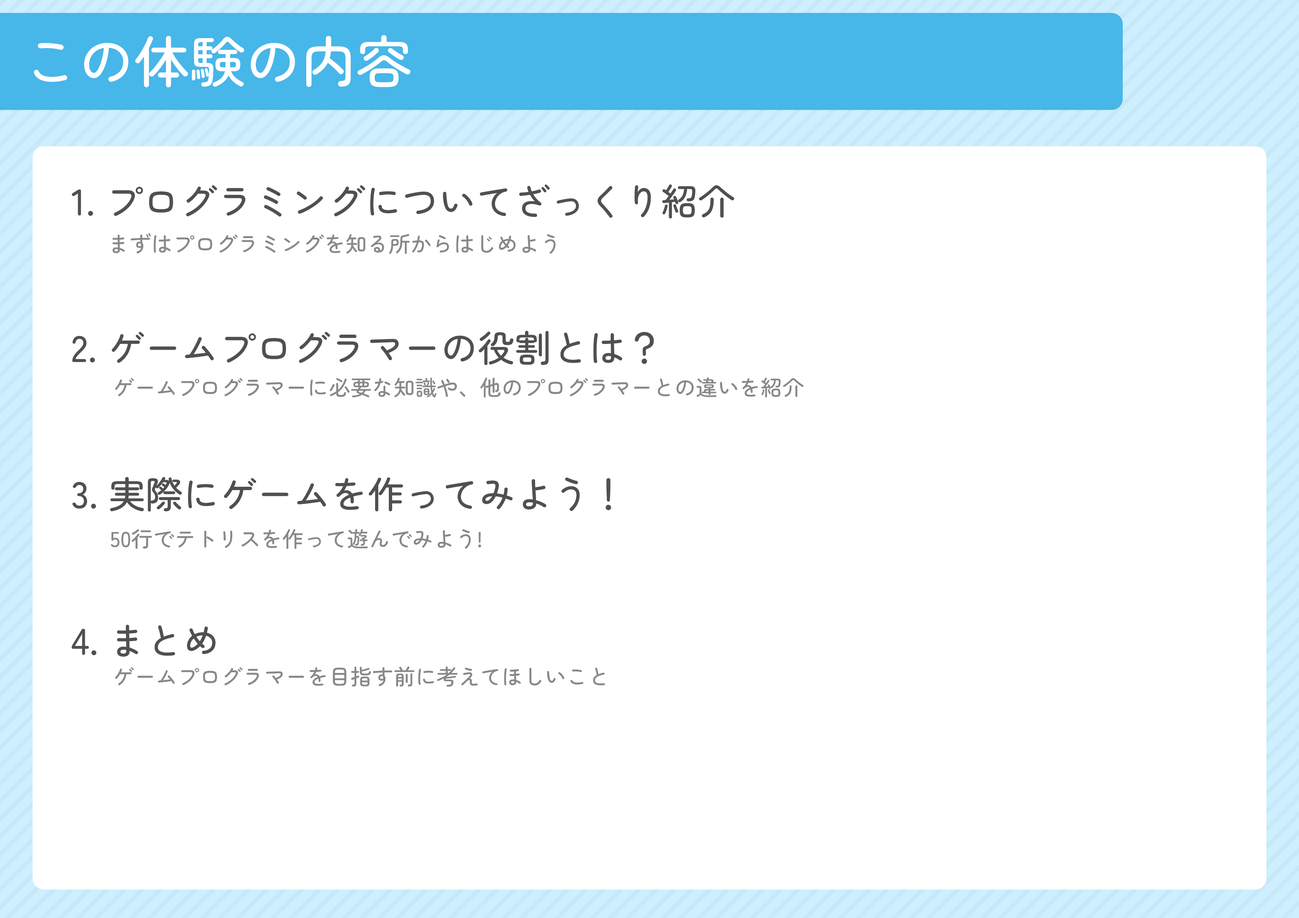
<style>
.page{position:relative;width:1299px;height:918px;background:#ffffff}
.page>*{position:absolute;margin:0}
.t1{font:55.5px "ZenMaruGothic-Medium";color:#ffffff}
.t2{font:37px/146.5px "ZenMaruGothic-Medium";color:#505050}
.t3{font:21.6px "ZenMaruGothic-Medium";color:#888888}
</style>
<div class="page">
<p class="t1" style="left:34px;top:35px;width:377px;height:53px">この体験の内容</p>
<p class="t2" style="left:71px;top:184px;width:663px;height:473px">1. プログラミングについてざっくり紹介<br>2. ゲームプログラマーの役割とは？<br>3. 実際にゲームを作ってみよう！<br>4. まとめ</p>
<p class="t3" style="left:112px;top:233px;width:444px;height:21px">まずはプログラミングを知る所からはじめよう</p>
<p class="t3" style="left:115px;top:377px;width:688px;height:21px">ゲームプログラマーに必要な知識や、他のプログラマーとの違いを紹介</p>
<p class="t3" style="left:111px;top:529px;width:370px;height:20px">50行でテトリスを作って遊んでみよう!</p>
<p class="t3" style="left:115px;top:666px;width:490px;height:21px">ゲームプログラマーを目指す前に考えてほしいこと</p>
</div>
